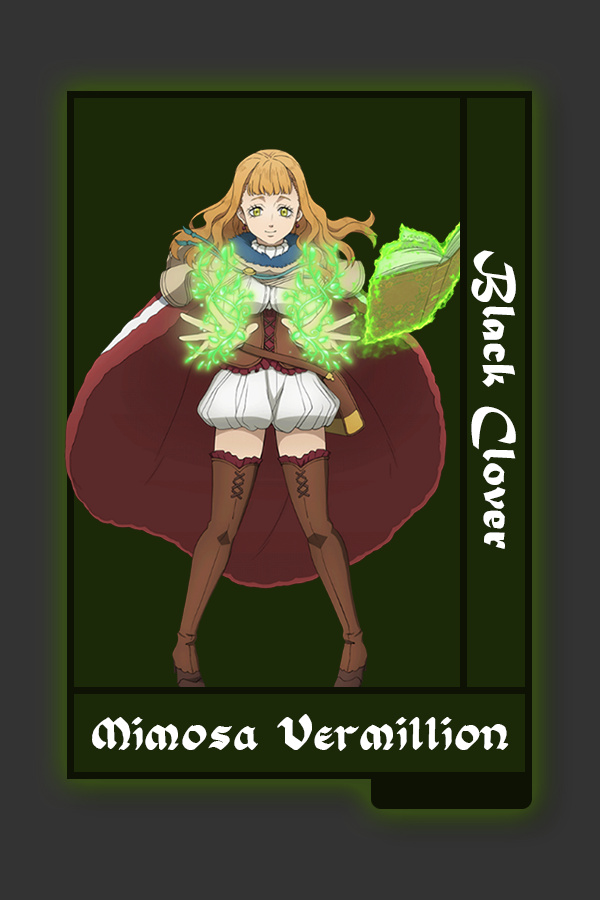
<style>
.page{position:relative;width:600px;height:900px;background:#1b2908}
.page>*{position:absolute;margin:0}
.t1{font:48.8px "MaturaMTScriptCapitals";color:#ffffff}
.t2{font:40px "FloranteatLaura";color:#ffffff}
</style>
<div class="page">
<p class="t1" style="left:471px;top:250px;width:45px;height:299px;rotate:90deg">Black Clover</p>
<p class="t2" style="left:92px;top:714px;width:417px;height:37px">Mimosa Vermillion</p>
</div>
